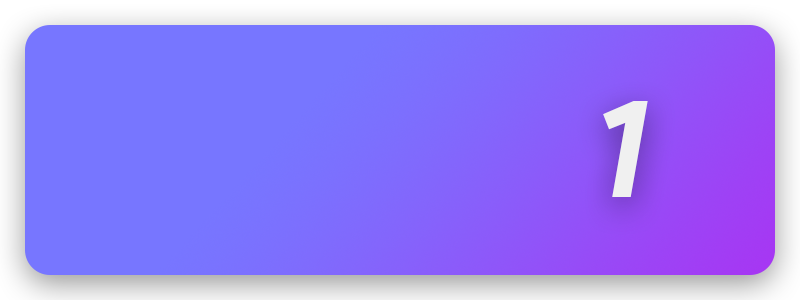
<style>
.page{position:relative;width:800px;height:300px;background:#7776ff}
.page>*{position:absolute;margin:0}
.t1{font:140px "ProductSans-BoldItalic";letter-spacing:0.46em;color:#f0f0f0}
</style>
<div class="page">
<p class="t1" style="left:603px;top:101px;width:45px;height:96px">1</p>
</div>
